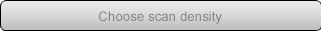
<style>
.page{position:relative;width:321px;height:35px}
.page>*{position:absolute;margin:0}
.t1{font:13.3px "ArialMT";color:#898888}
</style>
<div class="page">
<p class="t1" style="left:99px;top:11px;width:123px;height:13px">Choose scan density</p>
</div>
